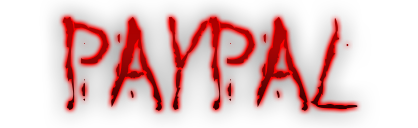
<style>
.page{position:relative;width:418px;height:128px;background:#ffffff}
.page>*{position:absolute;margin:0}
.t1{font:133.2px "AboutDead"}
</style>
<div class="page">
<p class="t1" style="left:62px;top:16px;width:296px;height:95px">pAYpAL</p>
</div>
